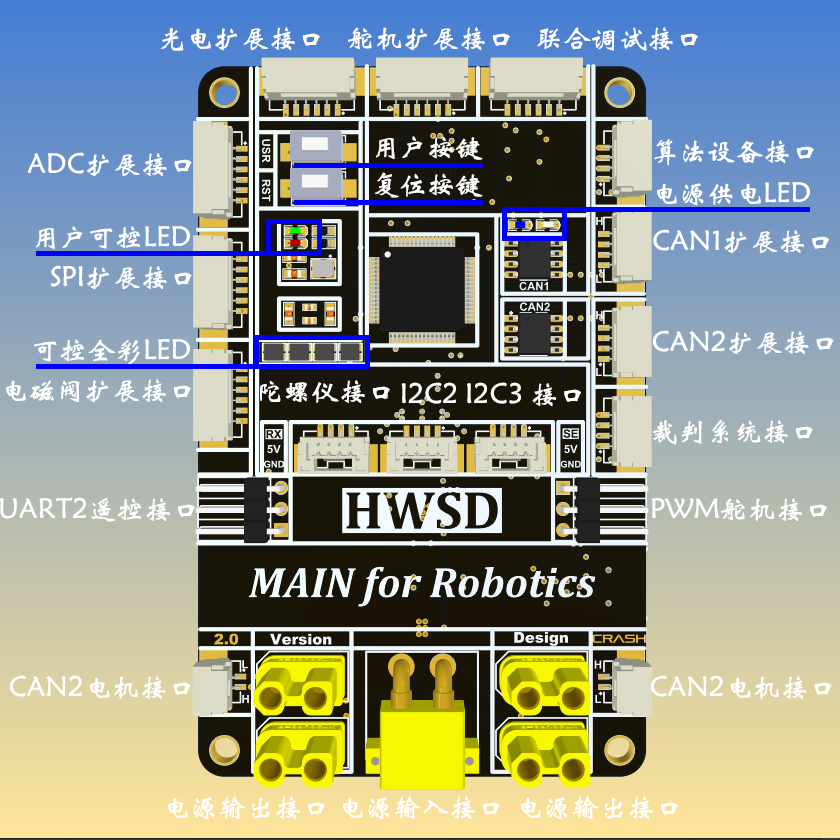
<style>
.page{position:relative;width:840px;height:840px}
.page>*{position:absolute;margin:0}
.t1{font:28px "STXinwei";color:#ffffff;text-transform:uppercase}
</style>
<div class="page">
<p class="t1" style="left:160px;top:27px;width:160px;height:24px">光电扩展接口</p>
<p class="t1" style="left:348px;top:27px;width:162px;height:24px">舵机扩展接口</p>
<p class="t1" style="left:537px;top:27px;width:161px;height:24px">联合调试接口</p>
<p class="t1" style="left:375px;top:136px;width:108px;height:24px">用户按键</p>
<p class="t1" style="left:654px;top:139px;width:160px;height:27px">算法设备接口</p>
<p class="t1" style="left:28px;top:152px;width:164px;height:25px">ADC扩展接口</p>
<p class="t1" style="left:374px;top:172px;width:109px;height:26px">复位按键</p>
<p class="t1" style="left:657px;top:182px;width:153px;height:24px">电源供电LED</p>
<p class="t1" style="left:36px;top:226px;width:154px;height:23px">用户可控LED</p>
<p class="t1" style="left:653px;top:229px;width:176px;height:25px">CAN1扩展接口</p>
<p class="t1" style="left:51px;top:265px;width:141px;height:25px">SPI扩展接口</p>
<p class="t1" style="left:34px;top:339px;width:156px;height:25px">可控全彩LED</p>
<p class="t1" style="left:653px;top:330px;width:181px;height:25px">CAN2扩展接口</p>
<p class="t1" style="left:6px;top:379px;width:185px;height:24px">电磁阀扩展接口</p>
<p class="t1" style="left:260px;top:380px;width:130px;height:24px">陀螺仪接口</p>
<p class="t1" style="left:401px;top:382px;width:180px;height:25px">I2C2 I2C3 接口</p>
<p class="t1" style="left:653px;top:419px;width:160px;height:26px">裁判系统接口</p>
<p class="t1" style="left:0px;top:497px;width:195px;height:25px">UART2遥控接口</p>
<p class="t1" style="left:651px;top:498px;width:176px;height:24px">PWM舵机接口</p>
<p class="t1" style="left:10px;top:675px;width:181px;height:25px">CAN2电机接口</p>
<p class="t1" style="left:651px;top:675px;width:181px;height:25px">CAN2电机接口</p>
<p class="t1" style="left:168px;top:796px;width:157px;height:24px">电源输出接口</p>
<p class="t1" style="left:343px;top:796px;width:157px;height:24px">电源输入接口</p>
<p class="t1" style="left:521px;top:796px;width:157px;height:24px">电源输出接口</p>
</div>
